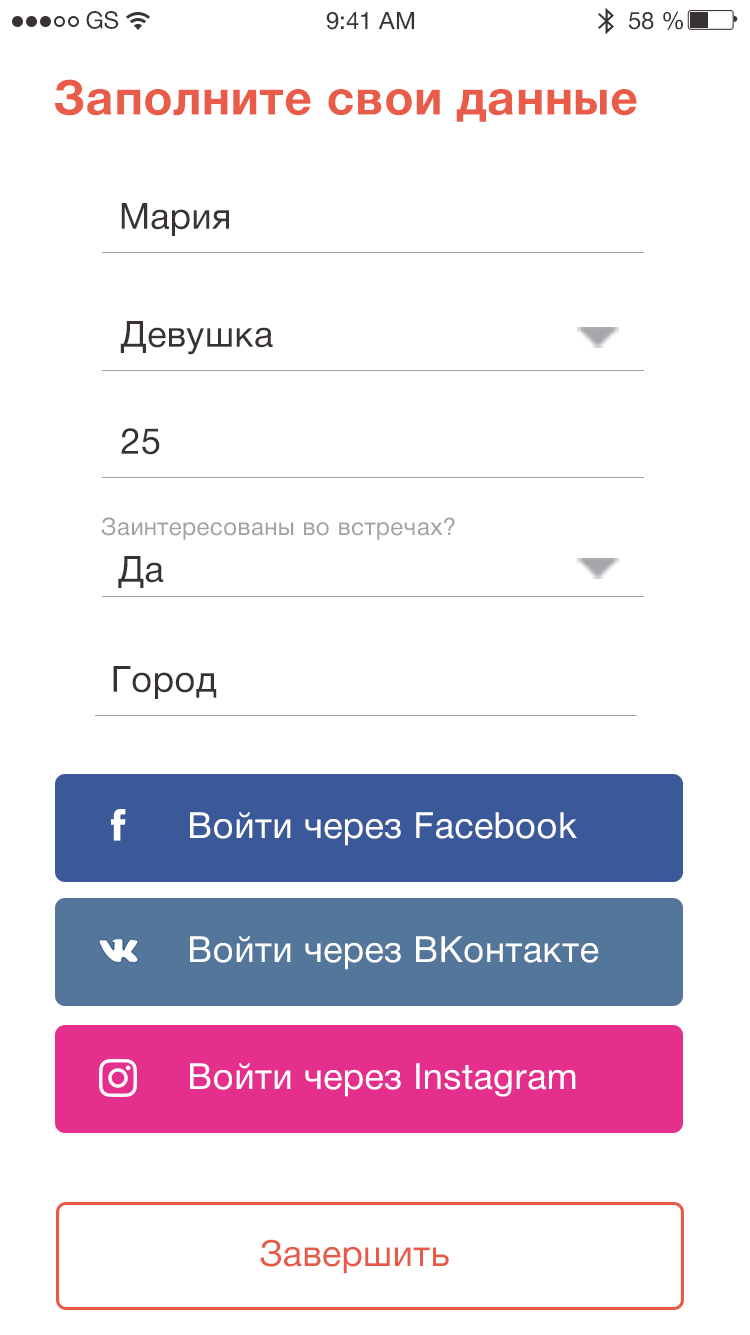
<style>
.page{position:relative;width:750px;height:1335px;background:#ffffff}
.page>*{position:absolute;margin:0}
.t1{font:24px "HelveticaNeueCyr-Roman";color:#383234}
.t2{font:48px "HelveticaNeueCyr-Bold";letter-spacing:0.016em;color:#e95c4a}
.t3{font:36px "HelveticaNeueCyr-Roman";letter-spacing:0.016em;color:#393335}
.t4{font:36px "HelveticaNeueCyr-Roman";letter-spacing:0.016em;color:#383234}
.t5{font:24px "HelveticaNeueCyr-Roman";letter-spacing:0.016em;color:#a1a2a6}
.t6{font:36px "HelveticaNeueCyr-Roman";letter-spacing:0.016em;color:#373133}
.t7{font:36px "HelveticaNeueCyr-Roman";letter-spacing:0.016em;color:#ffffff}
.t8{font:36px "HelveticaNeueCyr-Roman";letter-spacing:0.016em;color:#e75a48}
</style>
<div class="page">
<p class="t1" style="left:86px;top:11px;width:33px;height:18px">GS</p>
<p class="t1" style="left:326px;top:11px;width:89px;height:19px">9:41 AM</p>
<p class="t1" style="left:628px;top:11px;width:55px;height:19px">58 %</p>
<p class="t2" style="left:55px;top:79px;width:582px;height:43px">Заполните свои данные</p>
<p class="t3" style="left:121px;top:203px;width:108px;height:33px">Мария</p>
<p class="t4" style="left:120px;top:321px;width:153px;height:34px">Девушка</p>
<p class="t4" style="left:121px;top:428px;width:39px;height:27px">25</p>
<p class="t5" style="left:101px;top:517px;width:354px;height:23px">Заинтересованы во встречах?</p>
<p class="t6" style="left:118px;top:556px;width:46px;height:32px">Да</p>
<p class="t6" style="left:113px;top:666px;width:104px;height:33px">Город</p>
<p class="t7" style="left:190px;top:812px;width:387px;height:34px">Войти через Facebook</p>
<p class="t7" style="left:190px;top:936px;width:409px;height:34px">Войти через ВКонтакте</p>
<p class="t7" style="left:190px;top:1063px;width:386px;height:34px">Войти через Instagram</p>
<p class="t8" style="left:260px;top:1239px;width:189px;height:35px">Завершить</p>
</div>
